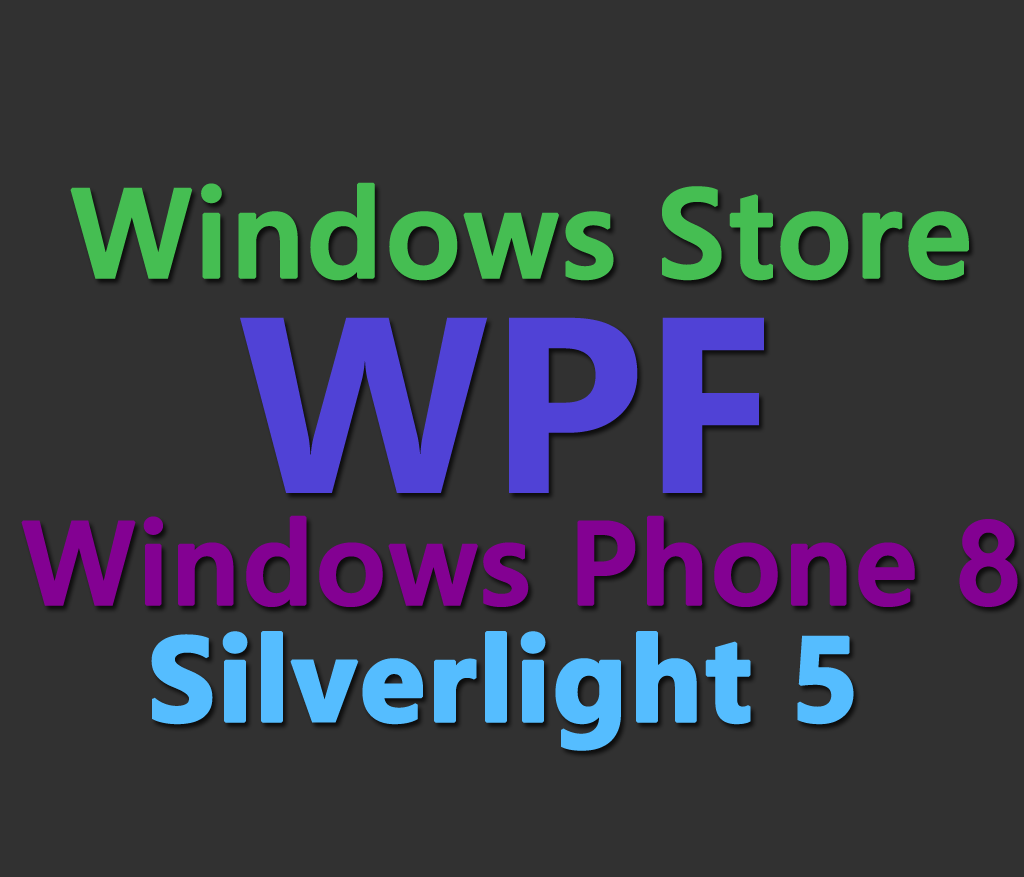
<style>
.page{position:relative;width:1024px;height:877px;background:#313131}
.page>*{position:absolute;margin:0}
.t1{font:125px "SegoeWP-Semibold";color:#46bd53;font-weight:bold}
.t2{font:250px "SegoeUI-Bold";color:#5042d6}
.t3{font:116.7px "SegoeWP-Semibold";color:#830192;font-weight:bold}
.t4{font:119.3px "SegoeWP-Bold";color:#55bdff;font-weight:bold}
</style>
<div class="page">
<p class="t1" style="left:70px;top:182px;width:899px;height:99px">Windows Store</p>
<p class="t2" style="left:240px;top:317px;width:524px;height:176px">WPF</p>
<p class="t3" style="left:21px;top:515px;width:997px;height:92px">Windows Phone 8</p>
<p class="t4" style="left:151px;top:631px;width:703px;height:120px">Silverlight 5</p>
</div>
